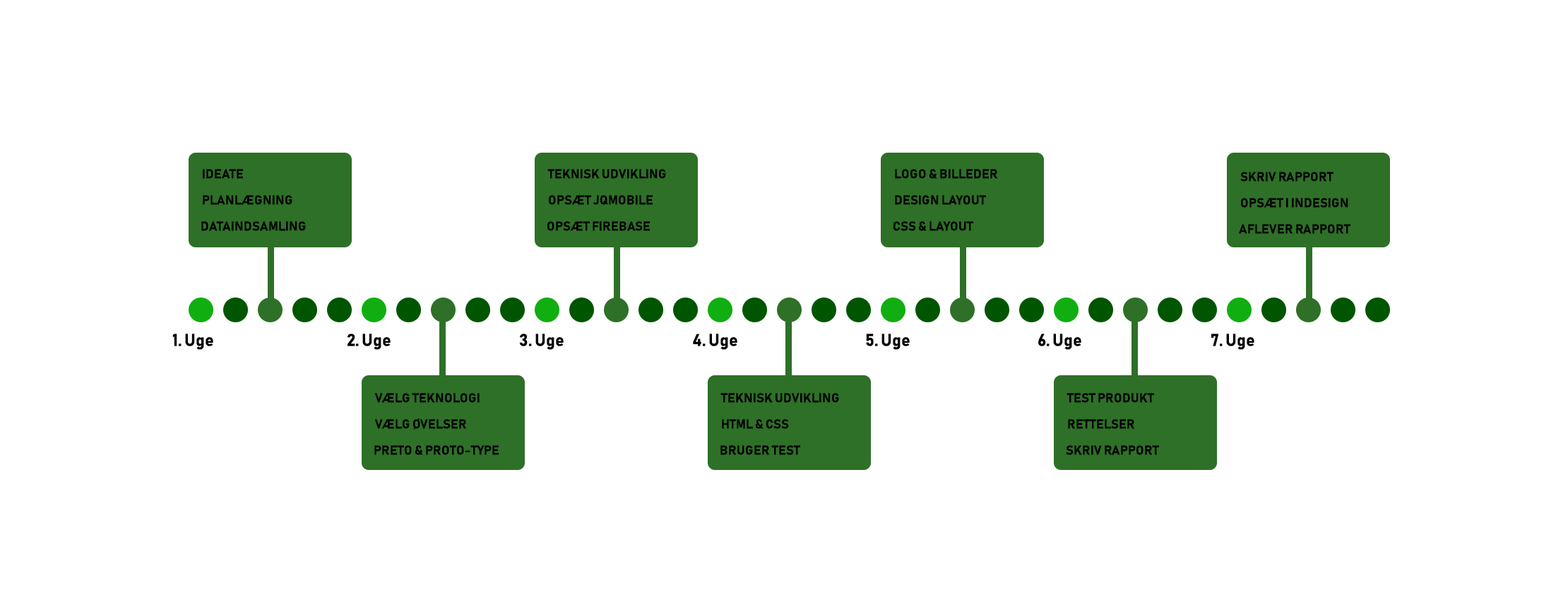
<style>
.page{position:relative;width:1568px;height:600px;background:#ffffff}
.page>*{position:absolute;margin:0}
.t1{font:12.7px "Bahnschrift-Bold";color:#000000}
.t2{font:17px "Bahnschrift-Bold";color:#000000}
</style>
<div class="page">
<p class="t1" style="left:203px;top:169px;width:40px;height:10px">IDEATE</p>
<p class="t1" style="left:547px;top:169px;width:119px;height:10px">TEKNISK UDVIKLING</p>
<p class="t1" style="left:895px;top:169px;width:102px;height:10px">LOGO &amp; BILLEDER</p>
<p class="t1" style="left:1240px;top:172px;width:94px;height:10px">SKRIV RAPPORT</p>
<p class="t1" style="left:203px;top:195px;width:89px;height:10px">PLANLÆGNING</p>
<p class="t1" style="left:549px;top:195px;width:104px;height:10px">OPSÆT JQMOBILE</p>
<p class="t1" style="left:895px;top:195px;width:91px;height:10px">DESIGN LAYOUT</p>
<p class="t1" style="left:1241px;top:198px;width:107px;height:10px">OPSÆT I INDESIGN</p>
<p class="t1" style="left:201px;top:221px;width:105px;height:10px">DATAINDSAMLING</p>
<p class="t1" style="left:547px;top:221px;width:103px;height:10px">OPSÆT FIREBASE</p>
<p class="t1" style="left:893px;top:221px;width:80px;height:10px">CSS &amp; LAYOUT</p>
<p class="t1" style="left:1239px;top:224px;width:111px;height:10px">AFLEVER RAPPORT</p>
<p class="t2" style="left:172px;top:333px;width:41px;height:17px">1. Uge</p>
<p class="t2" style="left:348px;top:333px;width:43px;height:17px">2. Uge</p>
<p class="t2" style="left:519px;top:333px;width:45px;height:17px">3. Uge</p>
<p class="t2" style="left:693px;top:333px;width:44px;height:17px">4. Uge</p>
<p class="t2" style="left:866px;top:333px;width:44px;height:17px">5. Uge</p>
<p class="t2" style="left:1038px;top:333px;width:43px;height:17px">6. Uge</p>
<p class="t2" style="left:1211px;top:333px;width:43px;height:17px">7. Uge</p>
<p class="t1" style="left:374px;top:393px;width:106px;height:10px">VÆLG TEKNOLOGI</p>
<p class="t1" style="left:720px;top:393px;width:119px;height:10px">TEKNISK UDVIKLING</p>
<p class="t1" style="left:1067px;top:393px;width:87px;height:10px">TEST PRODUKT</p>
<p class="t1" style="left:374px;top:418px;width:92px;height:11px">VÆLG ØVELSER</p>
<p class="t1" style="left:722px;top:419px;width:67px;height:10px">HTML &amp; CSS</p>
<p class="t1" style="left:1068px;top:419px;width:66px;height:10px">RETTELSER</p>
<p class="t1" style="left:374px;top:445px;width:125px;height:10px">PRETO &amp; PROTO-TYPE</p>
<p class="t1" style="left:720px;top:445px;width:80px;height:10px">BRUGER TEST</p>
<p class="t1" style="left:1066px;top:445px;width:93px;height:10px">SKRIV RAPPORT</p>
</div>
